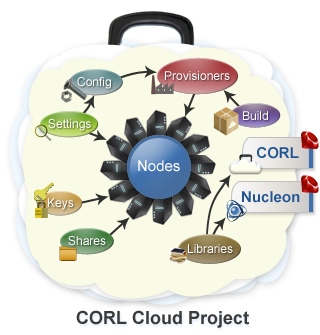
<style>
.page{position:relative;width:320px;height:335px;background:#fafbe7}
.page>*{position:absolute;margin:0}
.t1{font:12px "ArialMT";color:#ffffff}
.t2{font:15px "Arial-BoldMT";color:#215492}
.t3{font:15px "ArialMT";color:#ffffff}
.t4{font:12px "ArialMT";color:#fefefe}
.t5{font:18px "Arial-BoldMT";color:#3a3a3a}
</style>
<div class="page">
<p class="t1" style="left:77px;top:77px;width:34px;height:12px">Config</p>
<p class="t1" style="left:165px;top:71px;width:65px;height:9px">Provisioners</p>
<p class="t1" style="left:243px;top:111px;width:25px;height:9px">Build</p>
<p class="t1" style="left:48px;top:119px;width:43px;height:12px">Settings</p>
<p class="t2" style="left:257px;top:147px;width:42px;height:12px">CORL</p>
<p class="t3" style="left:138px;top:160px;width:42px;height:12px">Nodes</p>
<p class="t4" style="left:48px;top:198px;width:26px;height:12px">Keys</p>
<p class="t2" style="left:242px;top:191px;width:58px;height:12px">Nucleon</p>
<p class="t1" style="left:68px;top:236px;width:38px;height:10px">Shares</p>
<p class="t1" style="left:188px;top:244px;width:45px;height:9px">Libraries</p>
<p class="t5" style="left:76px;top:310px;width:173px;height:18px">CORL Cloud Project</p>
</div>
